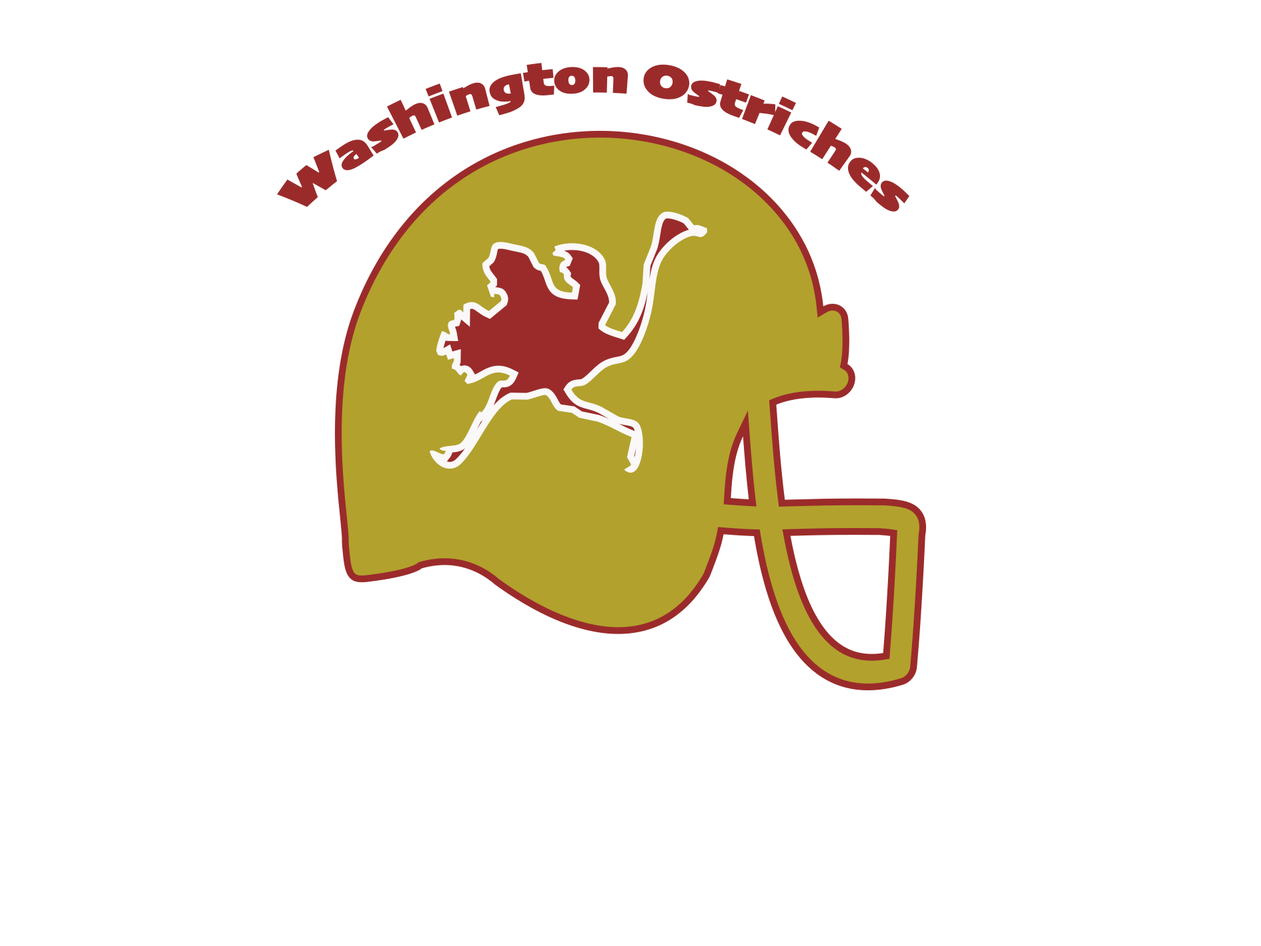
<style>
.page{position:relative;width:1261px;height:946px;background:#ffffff}
.page>*{position:absolute;margin:0}
.t1{font:50px "Skia-Black";color:#9b2b2b}
</style>
<div class="page">
<p class="t1" style="left:277px;top:63px;width:632px;height:149px">Washington Ostriches</p>
</div>
